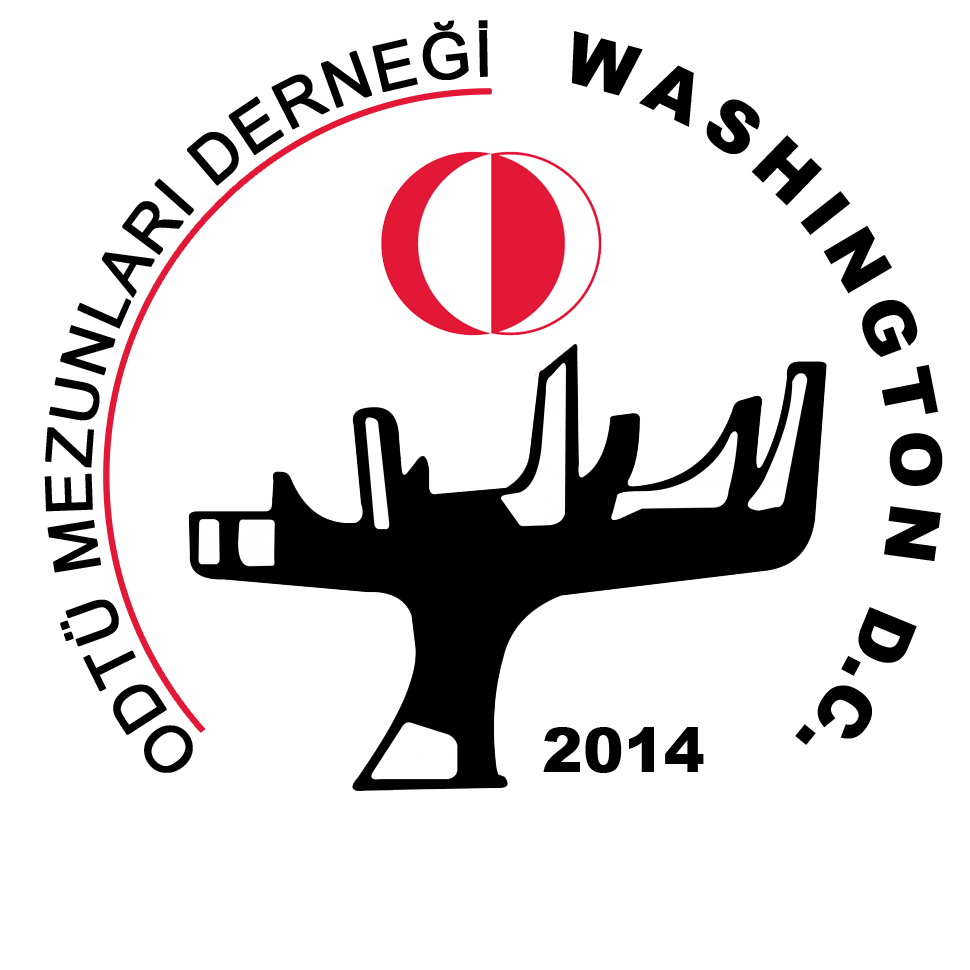
<style>
.page{position:relative;width:970px;height:970px;background:#ffffff}
.page>*{position:absolute;margin:0}
.t1{font:64px "ArialMT";letter-spacing:0.015em;color:#000000;font-weight:bold}
.t2{font:61px "ArialMT";letter-spacing:0.006em;color:#000000;font-weight:bold}
.t3{font:71px "Arial-Black";letter-spacing:0.145em;color:#000000}
.t4{font:71px "Arial-Black";color:#000000;scale:1.1 1}
.t5{font:71px "Arial-Black";letter-spacing:0.005em;color:#000000}
.t6{font:61px "Arial-Black";color:#000000}
</style>
<div class="page">
<p class="t1" style="left:44px;top:20px;width:444px;height:753px"><span class="t2">                 </span>ODTÜ MEZUNLARI DERNEĞİ</p>
<p class="t3" style="left:571px;top:31px;width:372px;height:714px"><span class="t4">                                                  </span>WASHINGTON <span class="t5">D.C.</span></p>
<p class="t6" style="left:543px;top:727px;width:161px;height:46px">2014</p>
</div>
